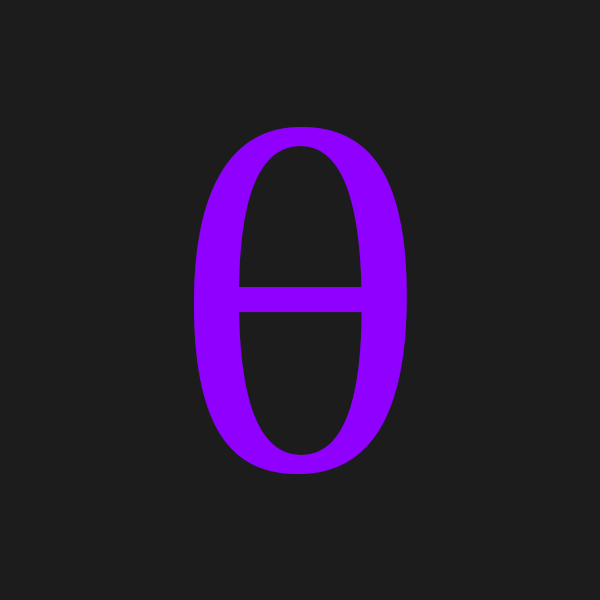
<style>
.page{position:relative;width:600px;height:600px;background:#1c1c1c}
.page>*{position:absolute;margin:0}
.t1{font:500px "CambriaMath";color:#9000ff}
</style>
<div class="page">
<p class="t1" style="left:194px;top:127px;width:213px;height:347px">θ</p>
</div>
